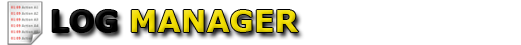
<style>
.page{position:relative;width:521px;height:45px;background:#ffffff}
.page>*{position:absolute;margin:0}
.t1{font:30px "Verdana-Bold";color:#f2de00}
.t2{font:30px "Verdana-Bold";color:#000000}
</style>
<div class="page">
<p class="t1" style="left:52px;top:10px;width:247px;height:22px"><span class="t2">LOG </span>MANAGER</p>
</div>
